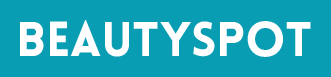
<style>
.page{position:relative;width:331px;height:77px;background:#099db3}
.page>*{position:absolute;margin:0}
.t1{font:48px "Lovelo-Black";color:#ffffff}
</style>
<div class="page">
<p class="t1" style="left:20px;top:20px;width:291px;height:37px">Beautyspot</p>
</div>
